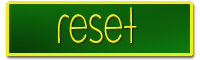
<style>
.page{position:relative;width:200px;height:60px}
.page>*{position:absolute;margin:0}
.t1{font:48px "cafbrewery";color:#f3f000;scale:0.73 1}
</style>
<div class="page">
<p class="t1" style="left:58px;top:7px;width:79px;height:36px">reset</p>
</div>
